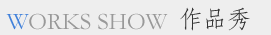
<style>
.page{position:relative;width:271px;height:35px;background:#eeeeee}
.page>*{position:absolute;margin:0}
.t1{font:24px "Garamond";color:#999999}
.t2{font:24px "Garamond";color:#4181da}
.t3{font:24px "AdobeFangsongStd-Regular";color:#333333}
</style>
<div class="page">
<p class="t1" style="left:6px;top:13px;width:162px;height:17px"><span class="t2">W</span>ORKS SHOW</p>
<p class="t3" style="left:180px;top:7px;width:70px;height:24px">作品秀</p>
</div>
